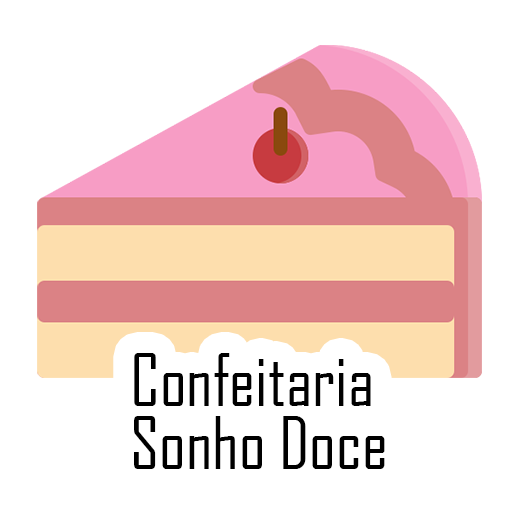
<style>
.page{position:relative;width:512px;height:512px;background:#ffffff}
.page>*{position:absolute;margin:0}
.t1{font:70px/63px "AgencyFB-Reg";color:#000000}
</style>
<div class="page">
<p class="t1" style="left:134px;top:353px;width:251px;height:116px;text-align:center">Confeitaria <br>Sonho Doce</p>
</div>
